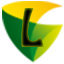
<style>
.page{position:relative;width:64px;height:64px;background:#ffffff}
.page>*{position:absolute;margin:0}
.t1{font:46.8px "HoboStd";scale:0.96 1}
</style>
<div class="page">
<p class="t1" style="left:21px;top:8px;width:23px;height:39px">L</p>
</div>
